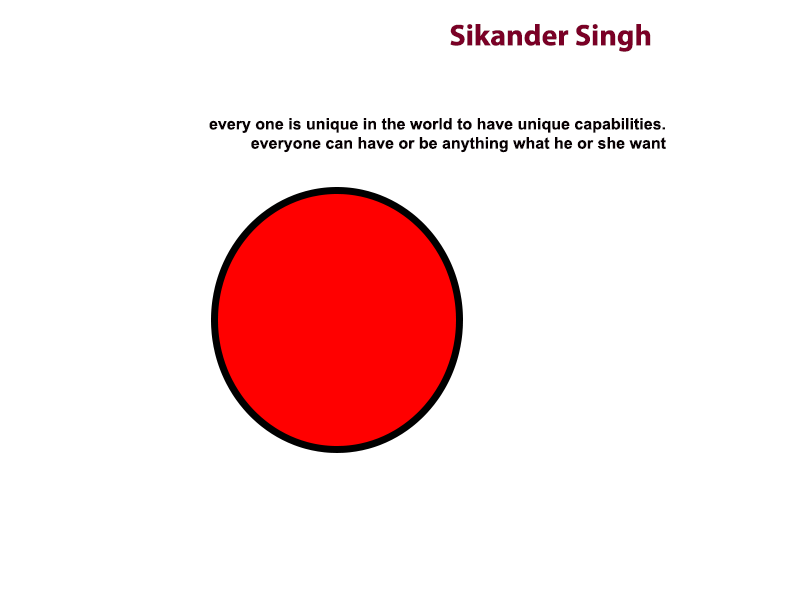
<style>
.page{position:relative;width:800px;height:600px;background:#ffffff}
.page>*{position:absolute;margin:0}
.t1{font:30px "MyriadPro-Bold";color:#7a0026}
.t2{font:16px "Arial-BoldMT";color:#080103}
</style>
<div class="page">
<p class="t1" style="left:450px;top:24px;width:201px;height:28px">Sikander Singh</p>
<p class="t2" style="left:209px;top:118px;width:457px;height:35px;text-align:right">every one is unique in the world to have unique capabilities. <br>everyone can have or be anything what he or she want</p>
</div>
